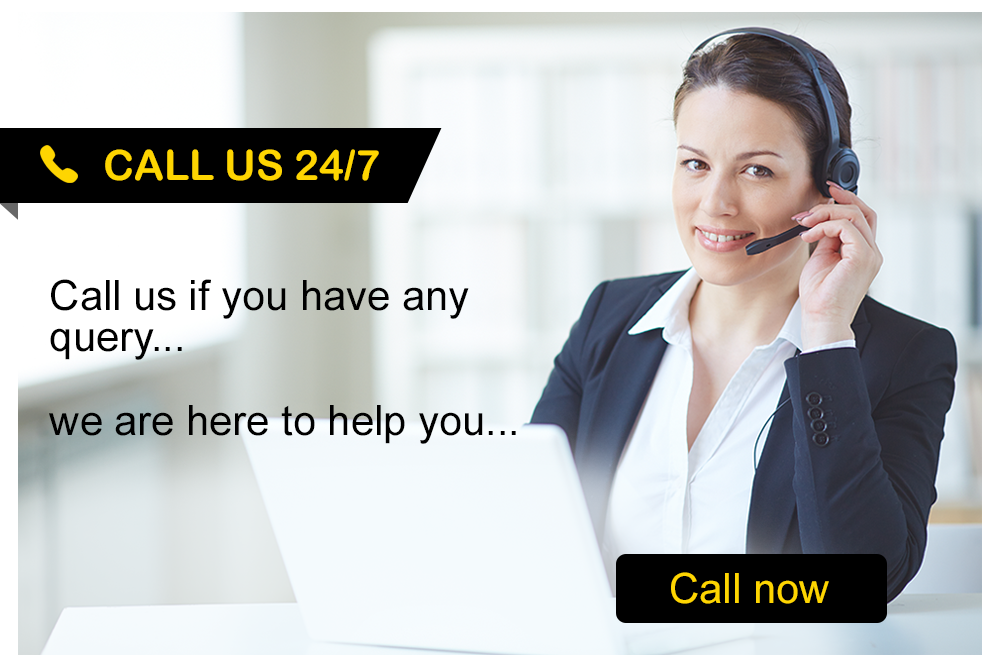
<style>
.page{position:relative;width:1000px;height:667px}
.page>*{position:absolute;margin:0}
.t1{font:41.7px "ArialRoundedMTBold";color:#fed501;text-transform:uppercase}
.t2{font:41.7px/41.7px "ArialMT";color:#000000}
.t3{font:41.7px "ArialMT";color:#fed501}
</style>
<div class="page">
<p class="t1" style="left:105px;top:149px;width:274px;height:32px">Call Us 24/7</p>
<p class="t2" style="left:49px;top:279px;width:467px;height:165px">Call us if you have any query...<br><br>we are here to help you...</p>
<p class="t3" style="left:671px;top:572px;width:158px;height:32px">Call now</p>
</div>
